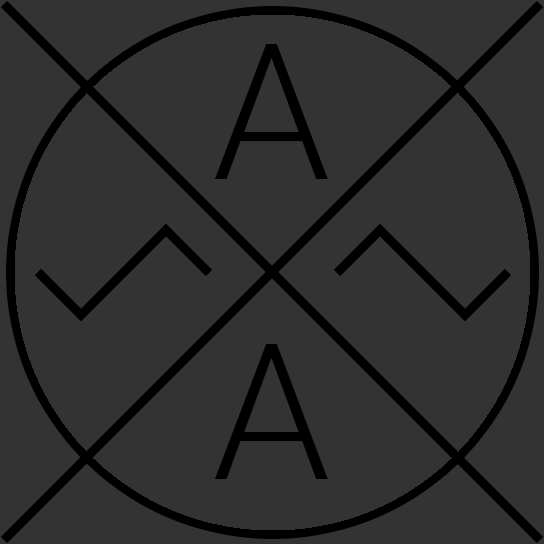
<style>
.page{position:relative;width:544px;height:544px;background:#333333}
.page>*{position:absolute;margin:0}
.t1{font:189.9px "Roboto-Light";color:#000000}
</style>
<div class="page">
<p class="t1" style="left:214px;top:44px;width:114px;height:135px">A</p>
<p class="t1" style="left:214px;top:344px;width:114px;height:135px">A</p>
</div>
